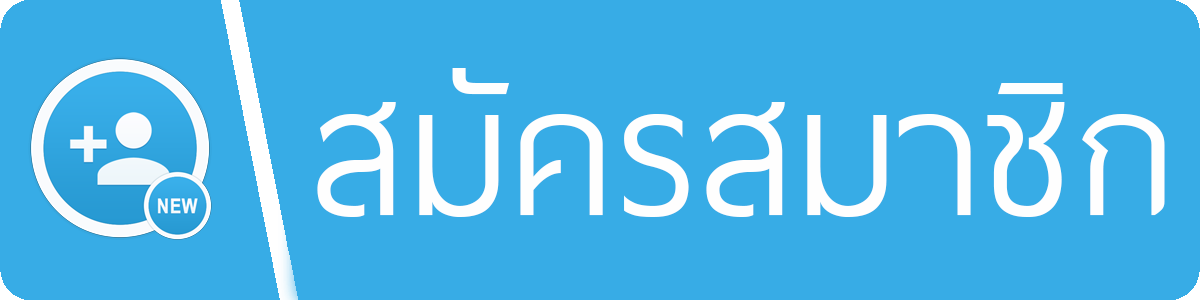
<style>
.page{position:relative;width:1200px;height:300px;background:#37ace6}
.page>*{position:absolute;margin:0}
.t1{font:230px "ThaiSansLite";color:#fefefe}
</style>
<div class="page">
<p class="t1" style="left:317px;top:68px;width:848px;height:149px">สมัครสมาชิก</p>
</div>
